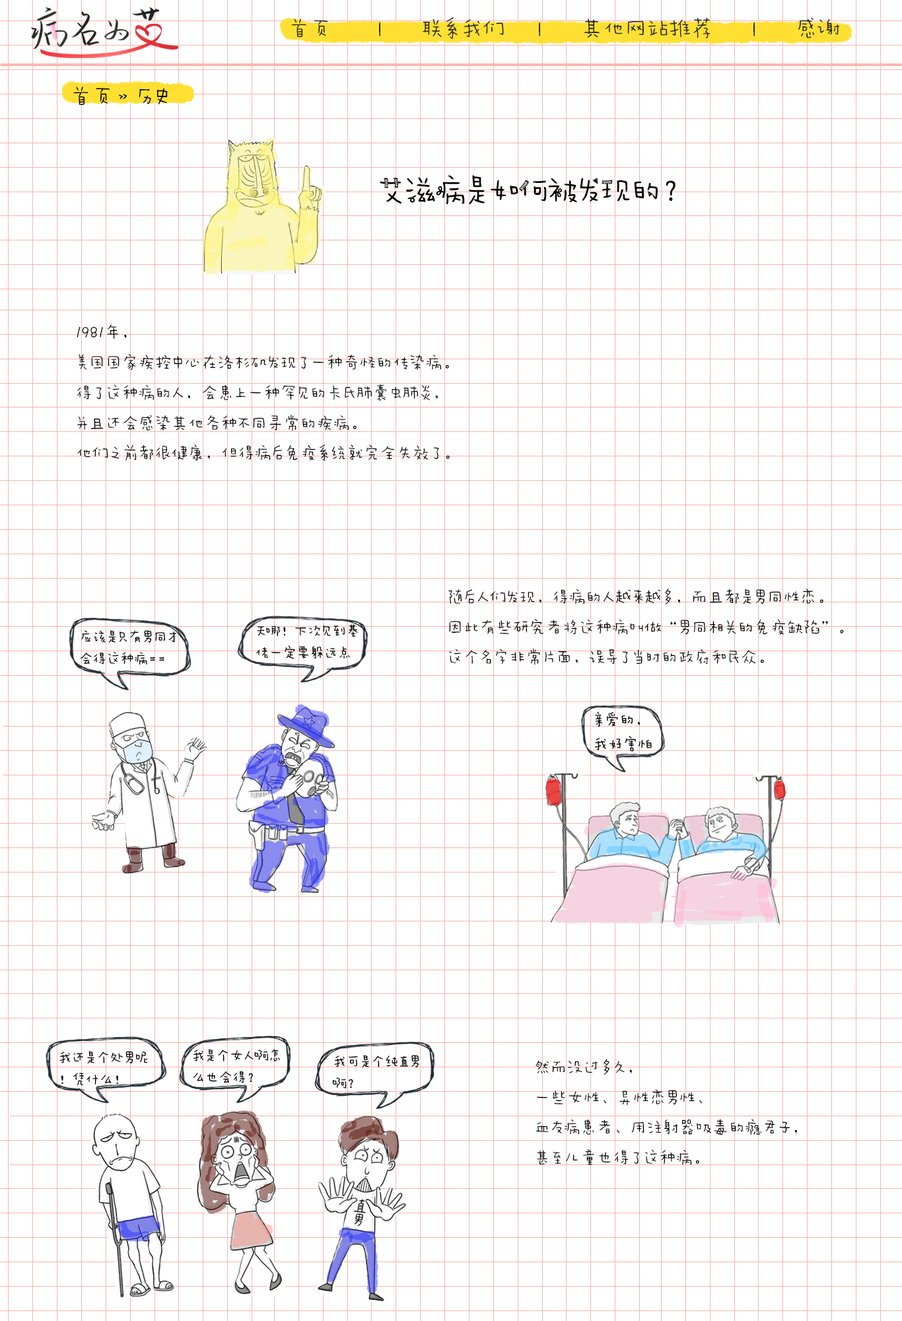
<style>
.page{position:relative;width:902px;height:1321px;background:#ffffff}
.page>*{position:absolute;margin:0}
.t1{font:22px "AaWanWan";color:#282a26}
.t2{font:22px "AaWanWan";color:#000000}
.t3{font:29.7px "AaPaperTape";color:#000000}
.t4{font:16.5px/30.3px "AaWanWan";color:#000000}
</style>
<div class="page">
<p class="t1" style="left:291px;top:17px;width:549px;height:22px">首页       |      联系我们     |      其他网站推荐      |      感谢</p>
<p class="t2" style="left:73px;top:87px;width:95px;height:18px">首页》历史</p>
<p class="t3" style="left:380px;top:175px;width:296px;height:30px">艾滋病是如何被发现的？</p>
<p class="t4" style="left:77px;top:324px;width:373px;height:137px">1981年，<br>美国国家疾控中心在洛杉矶发现了一种奇怪的传染病。<br>得了这种病的人，会患上一种罕见的卡氏肺囊虫肺炎，<br>并且还会感染其他各种不同寻常的疾病。<br>他们之前都很健康，但得病后免疫系统就完全失效了。</p>
<p class="t4" style="left:449px;top:589px;width:395px;height:76px">随后人们发现，得病的人越来越多，而且都是男同性恋。<br>因此有些研究者将这种病叫做“男同相关的免疫缺陷”。<br>这个名字非常片面，误导了当时的政府和民众。</p>
<p class="t4" style="left:536px;top:1059px;width:261px;height:106px">然而没过多久，<br>一些女性、异性恋男性、<br>血友病患者、用注射器吸毒的瘾君子，<br>甚至儿童也得了这种病。</p>
</div>
